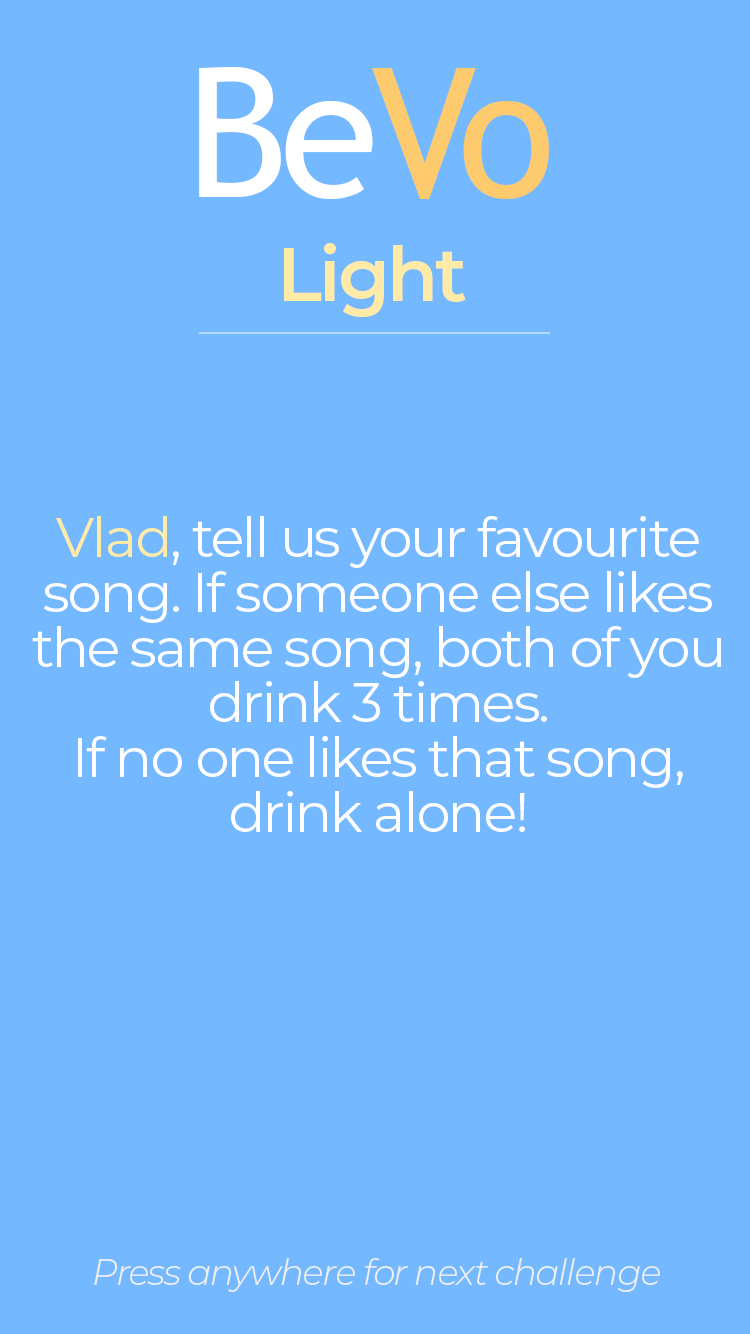
<style>
.page{position:relative;width:750px;height:1334px;background:#74b9ff}
.page>*{position:absolute;margin:0}
.t1{font:180px "TrebuchetMS";letter-spacing:-0.04em;color:#ffffff}
.t2{font:180px "TrebuchetMS";letter-spacing:-0.04em;color:#fdcb6e}
.t3{font:75px "Montserrat-SemiBold";letter-spacing:-0.04em;color:#ffeaa7}
.t4{font:55px/55px "Montserrat-Regular";letter-spacing:-0.04em;color:#ffffff}
.t5{font:55px/55px "Montserrat-Regular";letter-spacing:-0.04em;color:#ffeaa7}
.t6{font:36px "Montserrat-LightItalic";letter-spacing:-0.04em;color:#f0f0f0}
</style>
<div class="page">
<p class="t1" style="left:199px;top:67px;width:350px;height:132px">Be<span class="t2">Vo</span></p>
<p class="t3" style="left:284px;top:243px;width:182px;height:74px">Light</p>
<p class="t4" style="left:32px;top:516px;width:689px;height:316px;text-align:center"><span class="t5">Vlad</span>, tell us your favourite<br>song. If someone else likes<br>the same song, both of you<br>drink 3 times.<br>If no one likes that song,<br>drink alone!</p>
<p class="t6" style="left:94px;top:1258px;width:566px;height:34px">Press anywhere for next challenge</p>
</div>
